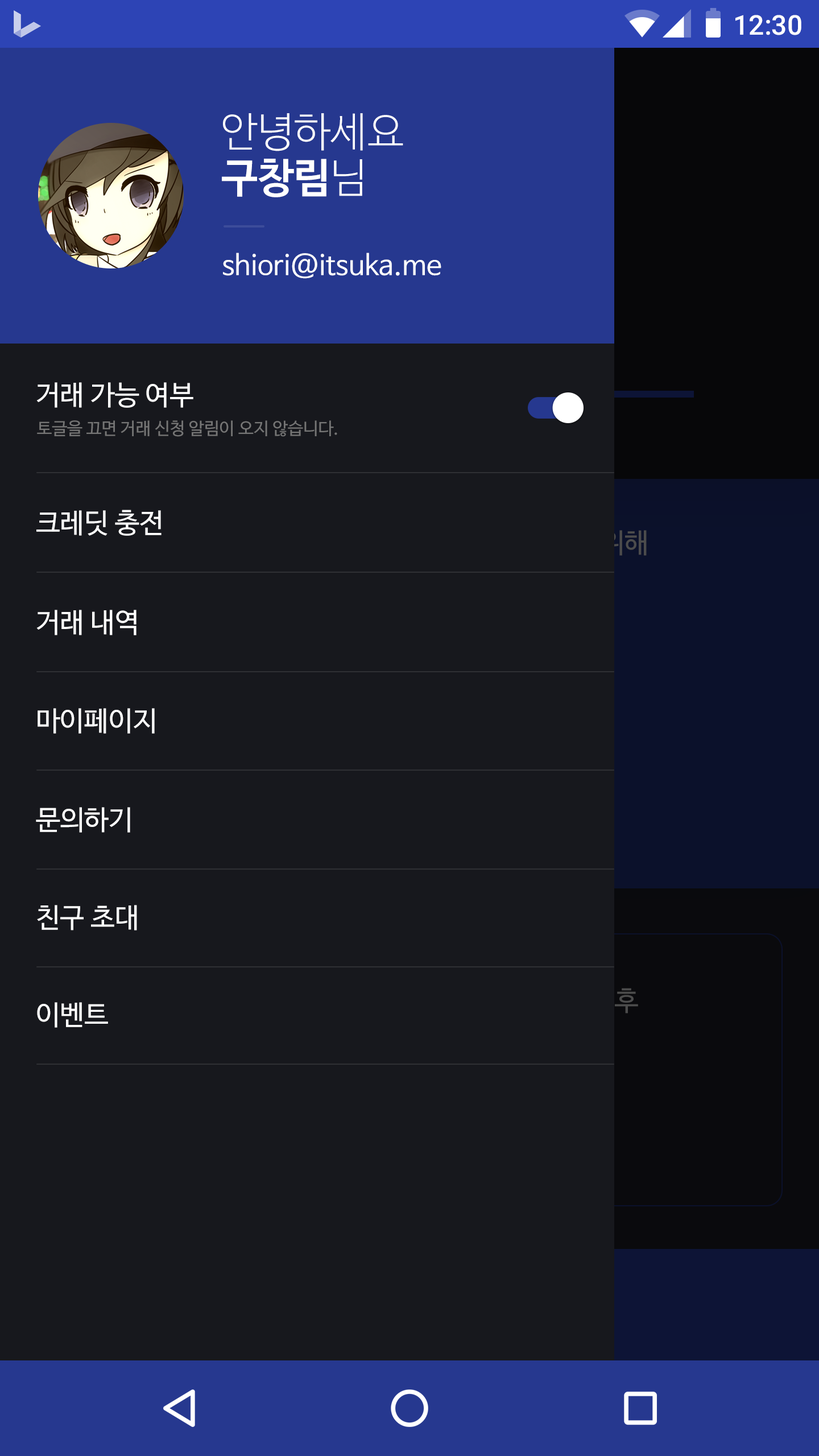
<style>
.page{position:relative;width:819px;height:1456px;background:#17181d}
.page>*{position:absolute;margin:0}
.t1{font:27.3px "Roboto-Medium";color:#ffffff}
.t2{font:40.9px/46.1px "NanumBarunGothicLight";color:#ffffff}
.t3{font:40.9px/46.1px "NanumBarunGothicBold";color:#ffffff}
.t4{font:27.3px "NanumBarunGothic";color:#ffffff}
.t5{font:17.1px "NanumBarunGothic";color:#757575}
</style>
<div class="page">
<p class="t1" style="left:735px;top:15px;width:66px;height:20px">12:30</p>
<p class="t2" style="left:222px;top:113px;width:181px;height:84px">안녕하세요<br><span class="t3">구창림</span>님</p>
<p class="t4" style="left:223px;top:253px;width:218px;height:26px">shiori@itsuka.me</p>
<p class="t4" style="left:36px;top:382px;width:157px;height:26px">거래 가능 여부</p>
<p class="t5" style="left:37px;top:420px;width:300px;height:17px">토글을 끄면 거래 신청 알림이 오지 않습니다.</p>
<p class="t4" style="left:36px;top:510px;width:126px;height:26px">크레딧 충전</p>
<p class="t4" style="left:36px;top:610px;width:100px;height:25px">거래 내역</p>
<p class="t4" style="left:38px;top:708px;width:117px;height:26px">마이페이지</p>
<p class="t4" style="left:36px;top:807px;width:94px;height:26px">문의하기</p>
<p class="t4" style="left:37px;top:905px;width:100px;height:25px">친구 초대</p>
<p class="t4" style="left:37px;top:1002px;width:71px;height:26px">이벤트</p>
</div>
